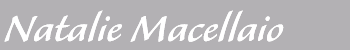
<style>
.page{position:relative;width:350px;height:50px;background:#b3b1b4}
.page>*{position:absolute;margin:0}
.t1{font:46px "AlexaStd";letter-spacing:0.01em;color:#ffffff}
</style>
<div class="page">
<p class="t1" style="left:4px;top:10px;width:280px;height:32px">Natalie Macellaio</p>
<p class="t1" style="left:4px;top:10px;width:280px;height:32px">Natalie Macellaio</p>
</div>
